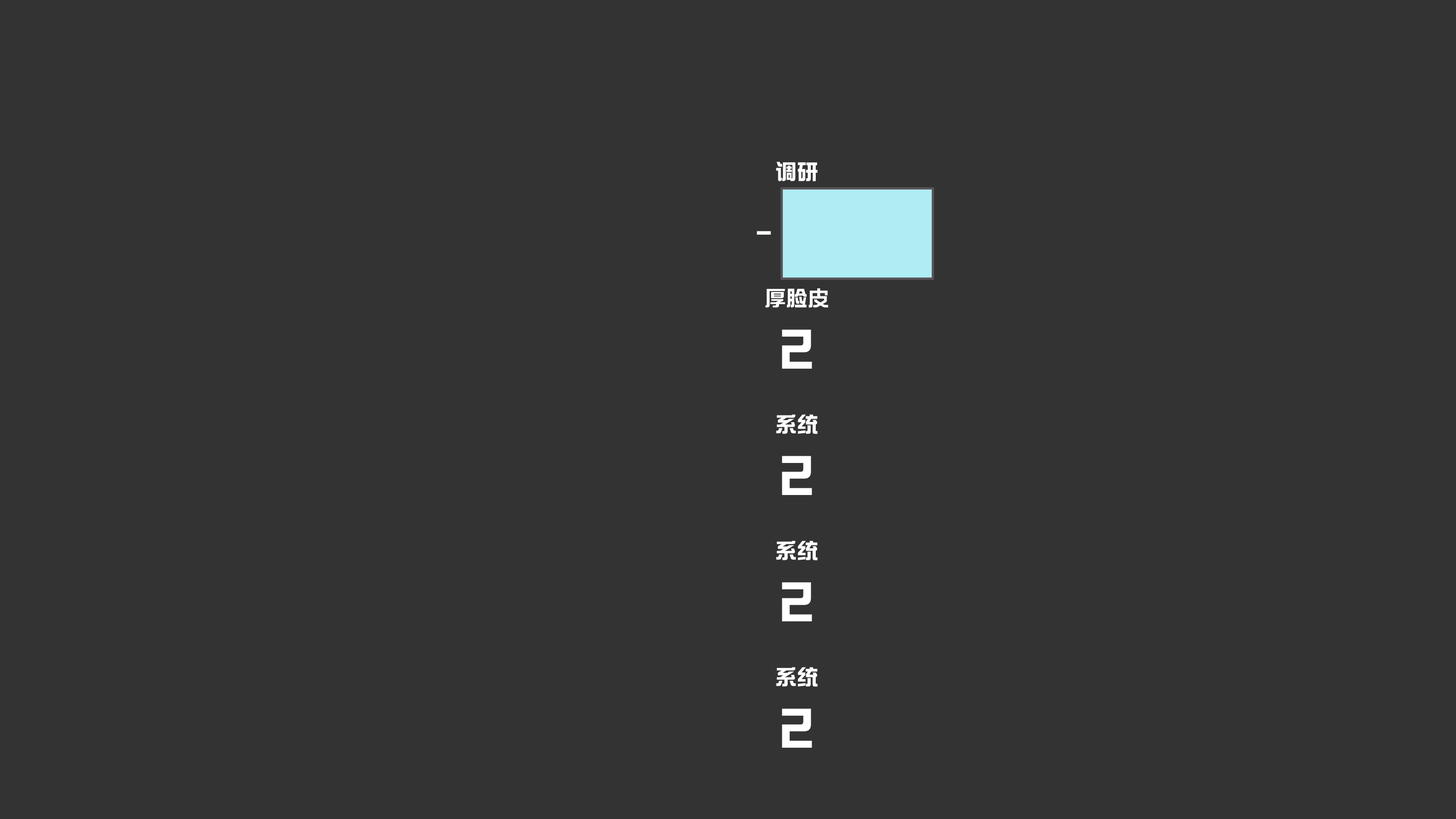
<style>
.page{position:relative;width:1456px;height:819px;background:#333333}
.page>*{position:absolute;margin:0}
.t1{font:21.7px/63.2px "FZXINZYHS-SB--GB1-0";color:#ffffff;text-transform:uppercase}
.t2{font:27.1px/63.2px "FZXINZYHS-SB--GB1-0";color:#ffffff;text-transform:uppercase}
.t3{font:54.1px/63.2px "FZXINZYHS-SB--GB1-0";color:#ffffff;text-transform:uppercase}
</style>
<div class="page">
<p class="t1" style="left:757px;top:162px;width:80px;height:586px;text-align:center">调研<br><span class="t2">- </span><span class="t3">2</span><span class="t2"> +<br></span>厚脸皮<br><span class="t3">2<br></span>系统<br><span class="t3">2<br></span>系统<br><span class="t3">2<br></span>系统<br><span class="t3">2</span></p>
</div>
